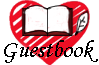
<style>
.page{position:relative;width:99px;height:65px;background:#ffffff}
.page>*{position:absolute;margin:0}
.t1{font:25px "MonotypeCorsiva";color:#000000}
</style>
<div class="page">
<p class="t1" style="left:4px;top:40px;width:94px;height:23px">Guestbook</p>
</div>
